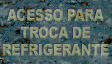
<style>
.page{position:relative;width:112px;height:64px}
.page>*{position:absolute;margin:0}
.t1{font:16px/17.3px "Arial-Black";letter-spacing:-0.02em;color:#8e9876;text-transform:uppercase;scale:0.79 1}
</style>
<div class="page">
<p class="t1" style="left:2px;top:9px;width:107px;height:47px;text-align:center">acesso para<br>troca de<br>refrigerante</p>
</div>
